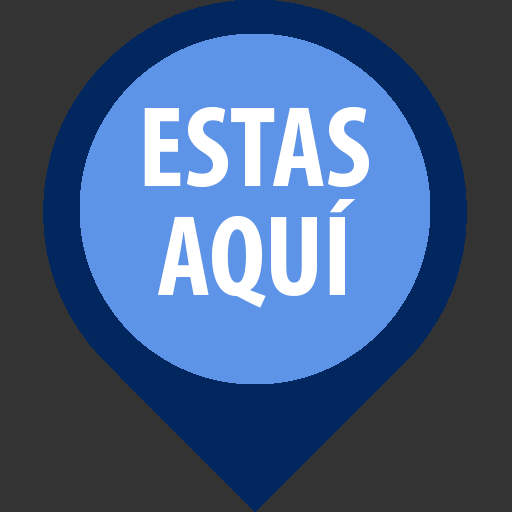
<style>
.page{position:relative;width:512px;height:512px;background:#333333}
.page>*{position:absolute;margin:0}
.t1{font:116.2px/108.8px "MyriadPro-BoldCond";color:#ffffff}
</style>
<div class="page">
<p class="t1" style="left:144px;top:107px;width:225px;height:201px;text-align:justify">ESTAS<br>AQUÍ</p>
</div>
